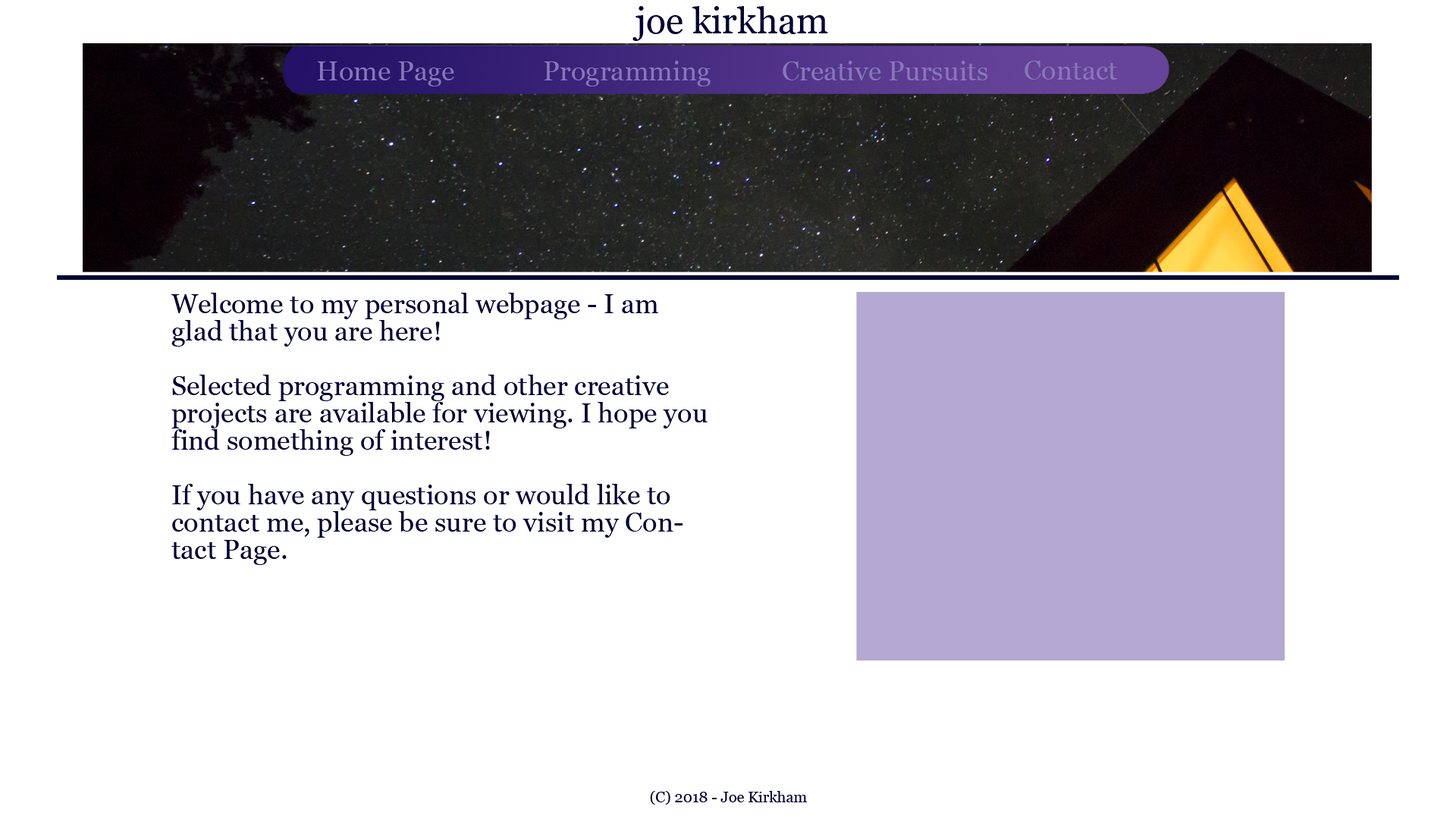
<style>
.page{position:relative;width:1456px;height:819px;background:#ffffff}
.page>*{position:absolute;margin:0}
.t1{font:36.4px "Georgia";color:#000033}
.t2{font:27.3px "Georgia";color:#8877bb}
.t3{font:27.3px/27.3px "Georgia";color:#000033}
.t4{font:15.2px "Georgia";color:#000033}
</style>
<div class="page">
<p class="t1" style="left:632px;top:6px;width:196px;height:35px">joe kirkham</p>
<p class="t2" style="left:317px;top:61px;width:137px;height:25px">Home Page</p>
<p class="t2" style="left:544px;top:61px;width:167px;height:25px">Programming</p>
<p class="t2" style="left:783px;top:61px;width:205px;height:19px">Creative Pursuits</p>
<p class="t2" style="left:1024px;top:61px;width:93px;height:19px">Contact</p>
<p class="t3" style="left:171px;top:293px;width:537px;height:272px">Welcome to my personal webpage - I am glad that you are here!<br><br>Selected programming and other creative projects are available for viewing. I hope you find something of interest!<br><br>If you have any questions or would like to contact me, please be sure to visit my Contact Page.</p>
<p class="t4" style="left:650px;top:791px;width:157px;height:14px">(C) 2018 - Joe Kirkham</p>
</div>
